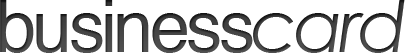
<style>
.page{position:relative;width:406px;height:54px;background:#ffffff}
.page>*{position:absolute;margin:0}
.t1{font:72px "Helvetica";letter-spacing:-0.05em;color:#3e3e3e}
.t2{font:72px "CenturyGothic-Italic";letter-spacing:-0.05em;color:#3e3e3e}
</style>
<div class="page">
<p class="t1" style="left:0px;top:0px;width:405px;height:53px">business<span class="t2">card</span></p>
</div>
